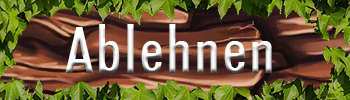
<style>
.page{position:relative;width:350px;height:100px}
.page>*{position:absolute;margin:0}
.t1{font:65px "FuturaBT-MediumCondensed";letter-spacing:0.04em}
</style>
<div class="page">
<p class="t1" style="left:65px;top:24px;width:207px;height:49px">Ablehnen</p>
</div>
